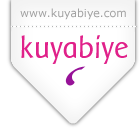
<style>
.page{position:relative;width:140px;height:130px;background:#ffffff}
.page>*{position:absolute;margin:0}
.t1{font:11px "Verdana";color:#a3a3a3}
.t2{font:31px "BaarSophia";color:#e0218a}
</style>
<div class="page">
<p class="t1" style="left:20px;top:8px;width:106px;height:12px">www.kuyabiye.com</p>
<p class="t2" style="left:21px;top:35px;width:107px;height:29px">kuyabiye</p>
</div>
